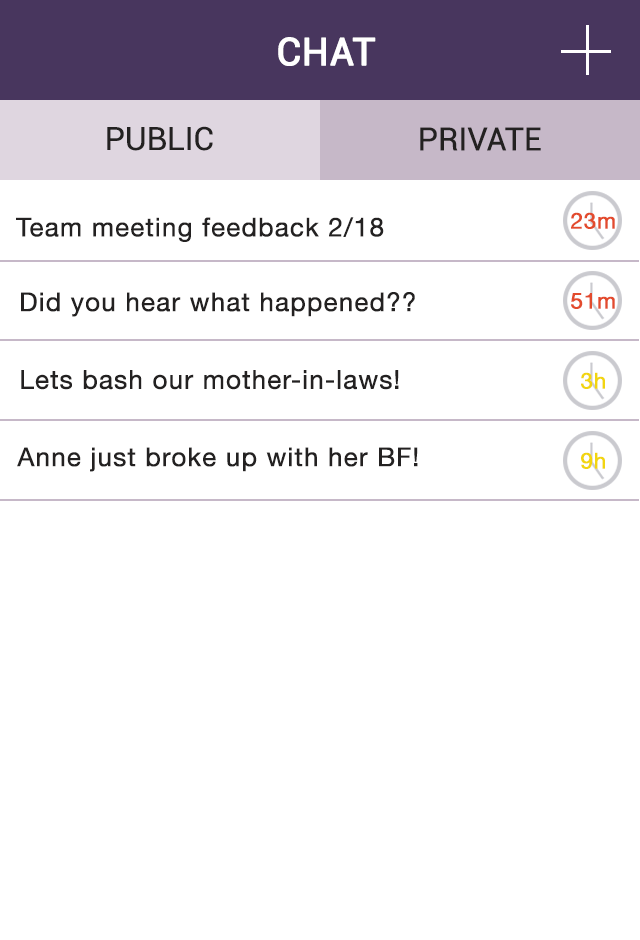
<style>
.page{position:relative;width:640px;height:940px;background:#ffffff}
.page>*{position:absolute;margin:0}
.t1{font:38px "Roboto-Regular";color:#ffffff;font-weight:bold}
.t2{font:32px "Roboto-Regular";color:#232121}
.t3{font:26px "HelveticaNeue";letter-spacing:0.02em;color:#232121;font-weight:bold}
.t4{font:22px "HelveticaNeue";letter-spacing:0.02em;color:#e34b2d;font-weight:bold}
.t5{font:22px "HelveticaNeue";letter-spacing:0.02em;color:#f2d510;font-weight:bold}
</style>
<div class="page">
<p class="t1" style="left:278px;top:37px;width:98px;height:29px">CHAT</p>
<p class="t2" style="left:107px;top:126px;width:106px;height:25px">PUBLIC</p>
<p class="t2" style="left:420px;top:127px;width:121px;height:24px">PRIVATE</p>
<p class="t3" style="left:16px;top:217px;width:368px;height:25px">Team meeting feedback 2/18</p>
<p class="t4" style="left:571px;top:212px;width:44px;height:17px">23m</p>
<p class="t3" style="left:21px;top:292px;width:394px;height:25px">Did you hear what happened??</p>
<p class="t4" style="left:571px;top:293px;width:44px;height:16px">51m</p>
<p class="t3" style="left:21px;top:370px;width:378px;height:20px">Lets bash our mother-in-laws!</p>
<p class="t5" style="left:581px;top:372px;width:24px;height:17px">3h</p>
<p class="t3" style="left:17px;top:447px;width:401px;height:25px">Anne just broke up with her BF!</p>
<p class="t5" style="left:581px;top:452px;width:24px;height:17px">9h</p>
</div>
